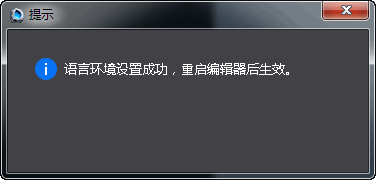
<style>
.page{position:relative;width:376px;height:180px;background:#414146}
.page>*{position:absolute;margin:0}
.t1{font:13.3px "MicrosoftYaHei";color:#ffffff}
</style>
<div class="page">
<p class="t1" style="left:64px;top:63px;width:225px;height:12px">语言环境设置成功，重启编辑器后生效。</p>
</div>
